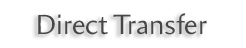
<style>
.page{position:relative;width:246px;height:48px;background:#ffffff}
.page>*{position:absolute;margin:0}
.t1{font:28px "Amira-Roman";color:#474747}
</style>
<div class="page">
<p class="t1" style="left:38px;top:13px;width:169px;height:22px">Direct Transfer</p>
</div>
